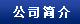
<style>
.page{position:relative;width:80px;height:24px}
.page>*{position:absolute;margin:0}
.t1{font:13px "NSimSun";color:#ffffff;text-transform:uppercase;font-weight:bold}
</style>
<div class="page">
<p class="t1" style="left:13px;top:6px;width:57px;height:12px">公司简介</p>
</div>
